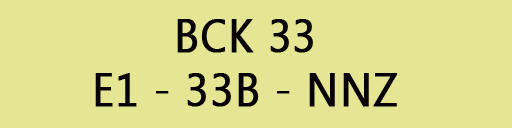
<style>
.page{position:relative;width:512px;height:128px;background:#e4e693}
.page>*{position:absolute;margin:0}
.t1{font:47px/54.2px "SegoeUI";letter-spacing:0.02em;color:#060100;font-weight:bold;scale:0.89 1}
</style>
<div class="page">
<p class="t1" style="left:95px;top:19px;width:303px;height:88px;text-align:center">BCK 33<br>E1 - 33B - NNZ</p>
</div>
